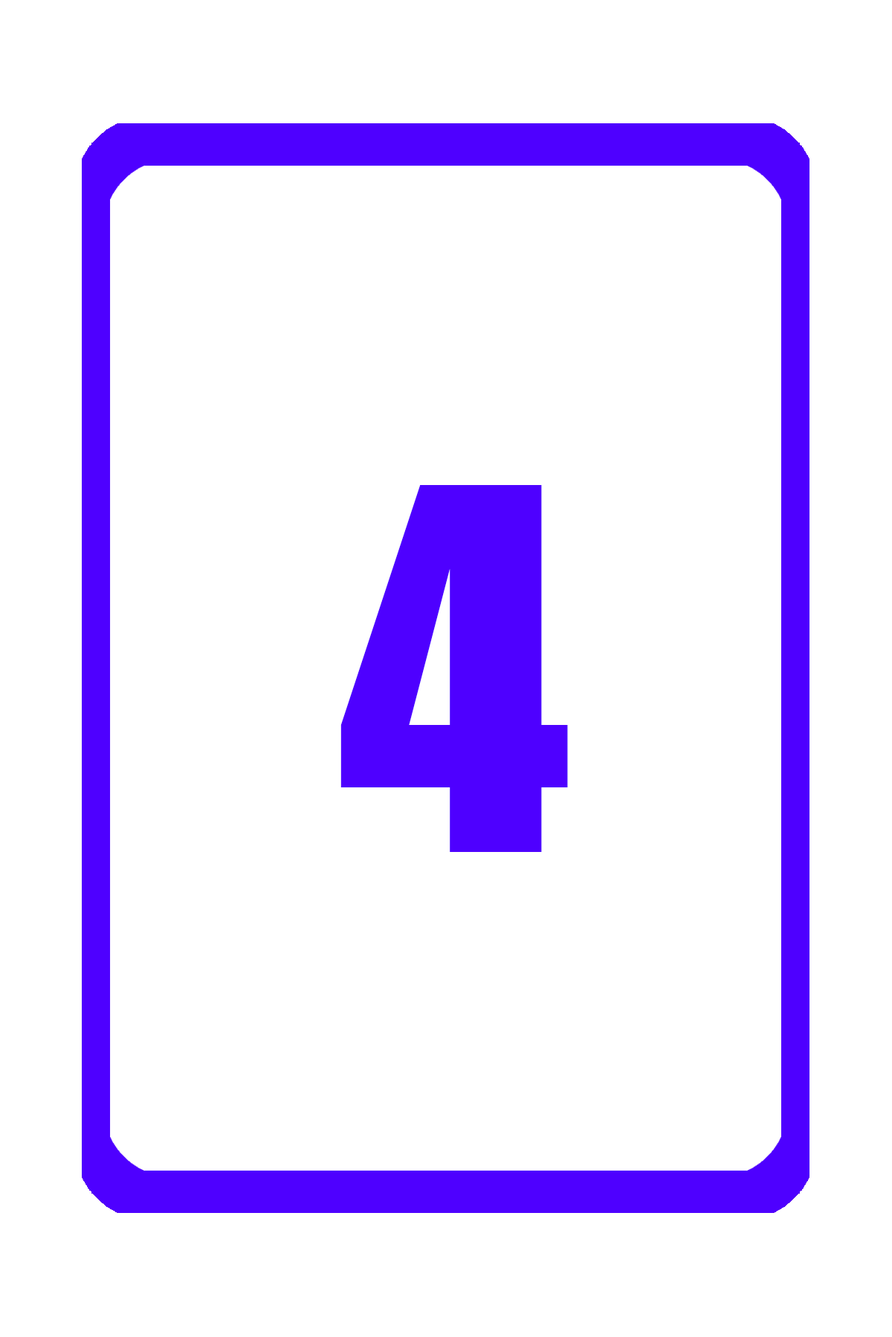
<style>
.page{position:relative;width:892px;height:1337px;background:#ffffff}
.page>*{position:absolute;margin:0}
.t1{font:464.4px "Impact";color:#4e00ff}
</style>
<div class="page">
<p class="t1" style="left:340px;top:485px;width:228px;height:367px">4</p>
</div>
